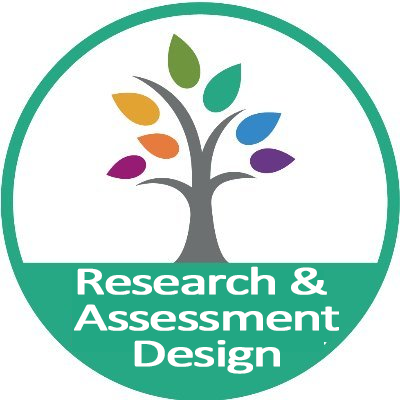
<style>
.page{position:relative;width:400px;height:400px;background:#ffffff}
.page>*{position:absolute;margin:0}
.t1{font:40px/36px "Calibri";letter-spacing:-0.05em;color:#ffffff;font-weight:bold;scale:1.45 1}
</style>
<div class="page">
<p class="t1" style="left:74px;top:266px;width:265px;height:108px;text-align:center">Research &amp; <br>Assessment<br>Design</p>
</div>
